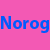
<style>
.page{position:relative;width:50px;height:50px;background:#f359b4}
.page>*{position:absolute;margin:0}
.t1{font:18px "MyriadPro-Bold";color:#005afe}
</style>
<div class="page">
<p class="t1" style="left:1px;top:16px;width:48px;height:17px">Norog</p>
</div>
